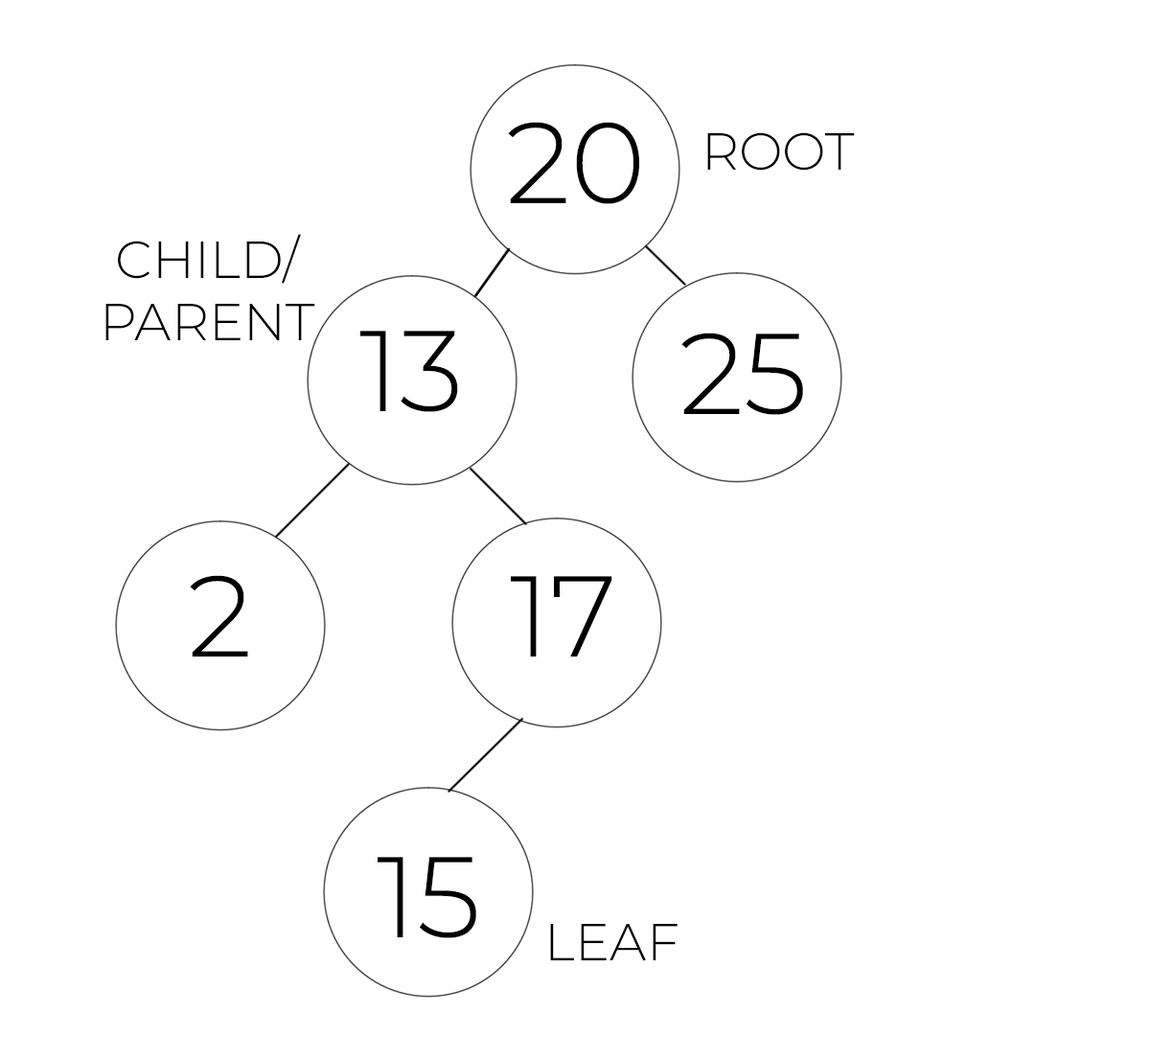
<style>
.page{position:relative;width:1150px;height:1037px;background:#ffffff}
.page>*{position:absolute;margin:0}
.t1{font:114.7px "Montserrat-Light";color:#000000;text-transform:uppercase}
.t2{font:51.9px "Montserrat-Light";color:#000000;text-transform:uppercase}
</style>
<div class="page">
<p class="t1" style="left:508px;top:122px;width:131px;height:82px">20</p>
<p class="t2" style="left:707px;top:132px;width:148px;height:39px">Root</p>
<p class="t2" style="left:105px;top:234px;width:210px;height:106px;text-align:center">CHILD/<br>PARENT</p>
<p class="t1" style="left:360px;top:331px;width:98px;height:81px">13</p>
<p class="t1" style="left:681px;top:333px;width:122px;height:82px">25</p>
<p class="t1" style="left:190px;top:575px;width:58px;height:81px">2</p>
<p class="t1" style="left:511px;top:576px;width:101px;height:80px">17</p>
<p class="t1" style="left:378px;top:857px;width:98px;height:81px">15</p>
<p class="t2" style="left:550px;top:924px;width:128px;height:36px">Leaf</p>
</div>
